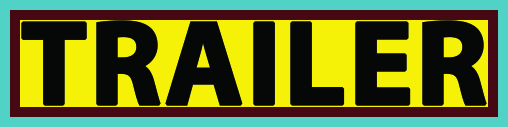
<style>
.page{position:relative;width:508px;height:127px;background:#060808}
.page>*{position:absolute;margin:0}
.t1{font:120px "MyriadPro-Bold";color:#060808;font-weight:bold}
</style>
<div class="page">
<p class="t1" style="left:21px;top:20px;width:466px;height:86px">TRAILER</p>
</div>
